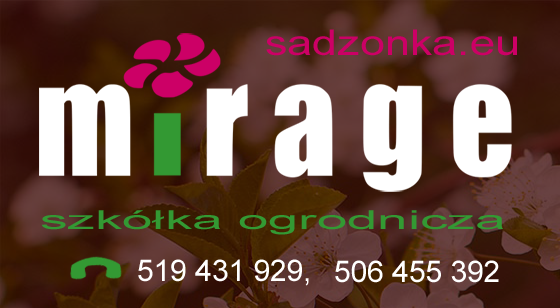
<style>
.page{position:relative;width:560px;height:308px}
.page>*{position:absolute;margin:0}
.t1{font:35.4px "ArialMT";color:#cc0066;scale:1.27 1}
.t2{font:25.9px "ArialMT";color:#339933;scale:2.11 1}
.t3{font:29.9px "ArialMT";color:#ffffff}
</style>
<div class="page">
<p class="t1" style="left:266px;top:29px;width:251px;height:27px">sadzonka.eu</p>
<p class="t2" style="left:41px;top:210px;width:462px;height:25px">szkółka ogrodnicza</p>
<p class="t3" style="left:138px;top:259px;width:171px;height:27px">519 431 929,</p>
<p class="t3" style="left:335px;top:260px;width:164px;height:23px">506 455 392</p>
</div>
